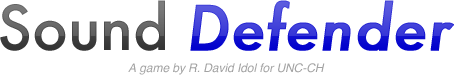
<style>
.page{position:relative;width:454px;height:75px;background:#ffffff}
.page>*{position:absolute;margin:0}
.t1{font:60px "Futura-MediumItalic";letter-spacing:-0.005em;font-weight:bold}
.t2{font:60px "Futura-Medium";letter-spacing:-0.005em}
.t3{font:12px "Helvetica-Oblique";letter-spacing:-0.005em;color:#a3a3a3}
</style>
<div class="page">
<p class="t1" style="left:0px;top:0px;width:454px;height:51px"><span class="t2">Sound </span>Defender</p>
<p class="t3" style="left:128px;top:63px;width:197px;height:12px">A game by R. David Idol for UNC-CH</p>
</div>
